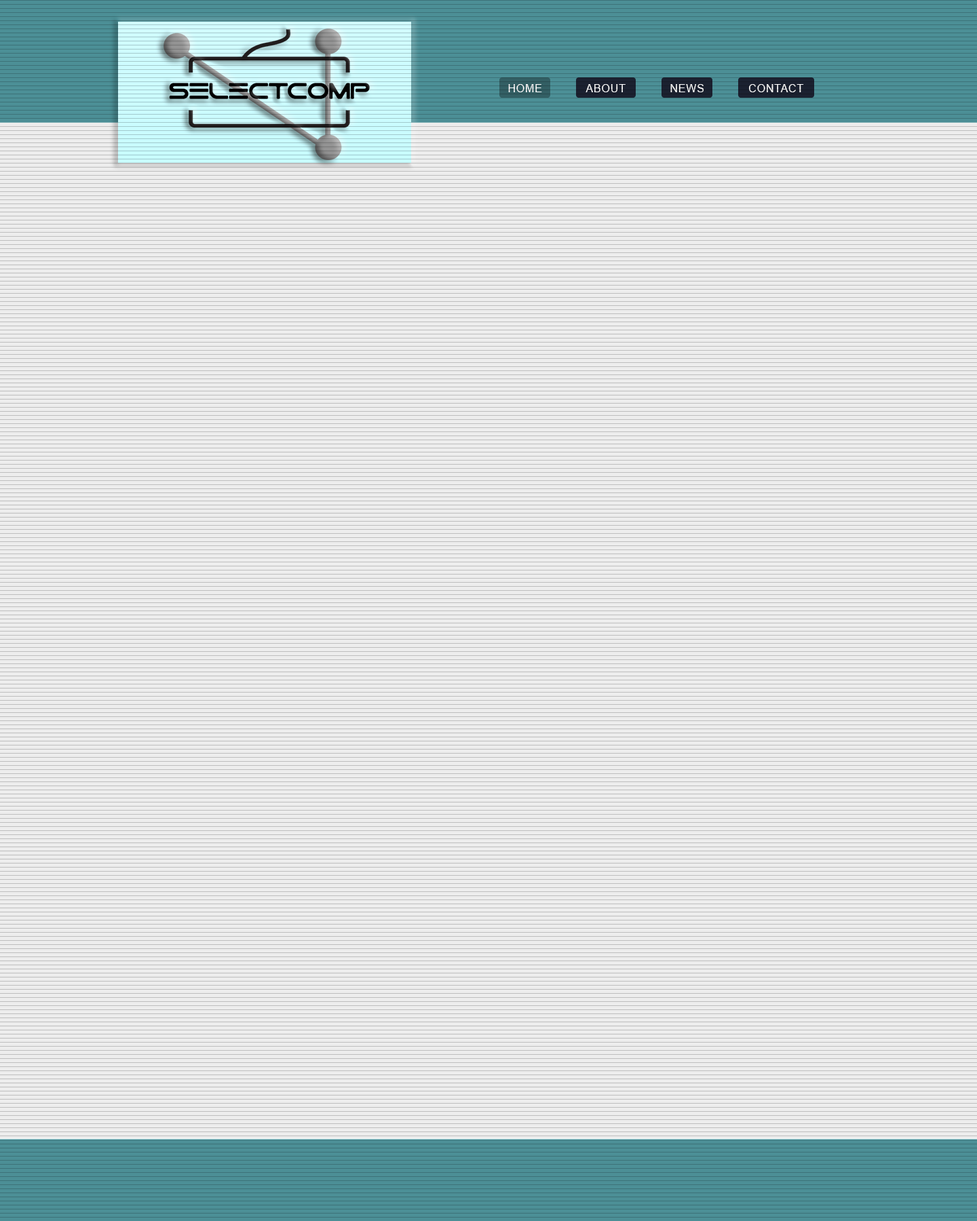
<style>
.page{position:relative;width:977px;height:1221px}
.page>*{position:absolute;margin:0}
.t1{font:10.9px "ArialMT";letter-spacing:0.05em;color:#ffffff}
</style>
<div class="page">
<p class="t1" style="left:508px;top:84px;width:34px;height:8px">HOME</p>
<p class="t1" style="left:585px;top:84px;width:40px;height:8px">ABOUT</p>
<p class="t1" style="left:670px;top:84px;width:34px;height:8px">NEWS</p>
<p class="t1" style="left:749px;top:84px;width:55px;height:8px">CONTACT</p>
</div>
